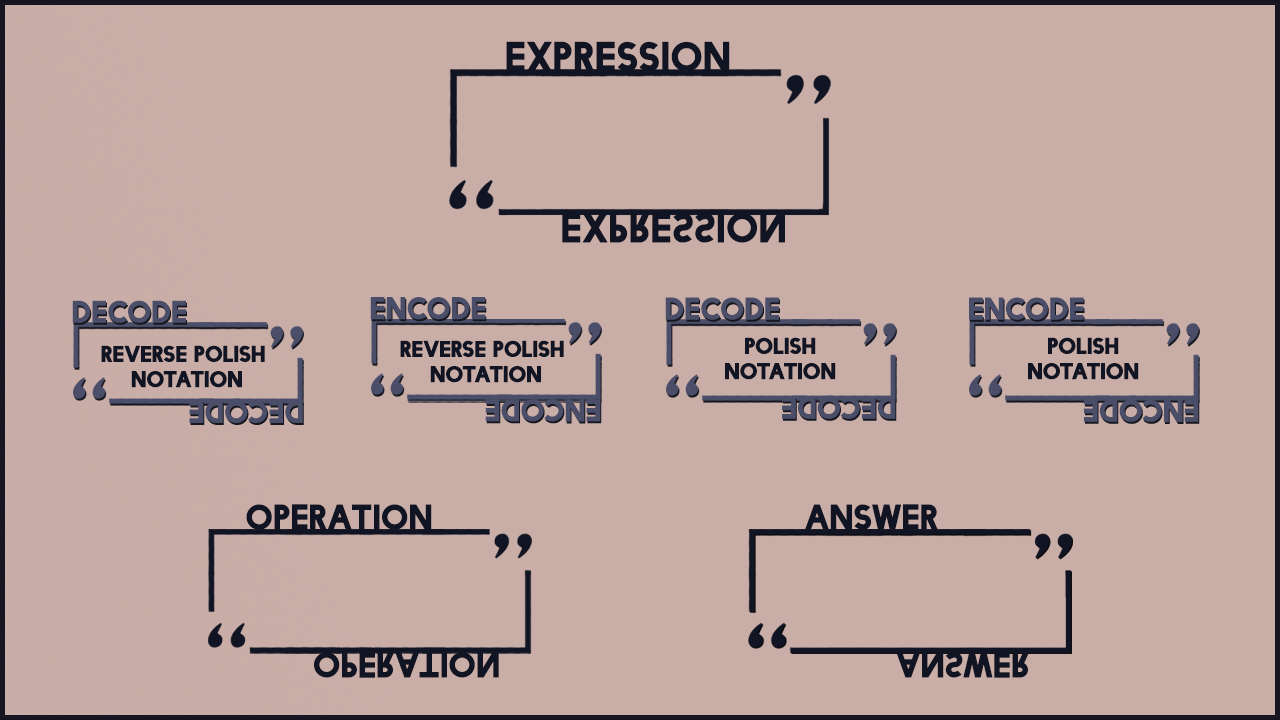
<style>
.page{position:relative;width:1280px;height:720px;background:#c9ada7}
.page>*{position:absolute;margin:0}
.t1{font:38.5px "FacileSans";color:#111422;font-weight:bold}
.t2{font:28.7px "FacileSans";color:#464a63;font-weight:bold}
.t3{font:21px "FacileSans";color:#111422;font-weight:bold}
.t4{font:32.7px "FacileSans";color:#111422;font-weight:bold}
</style>
<div class="page">
<p class="t1" style="left:506px;top:41px;width:224px;height:31px">Expression</p>
<p class="t1" style="left:562px;top:212px;width:223px;height:31px">Expression</p>
<p class="t2" style="left:72px;top:300px;width:114px;height:23px">decode</p>
<p class="t2" style="left:370px;top:297px;width:116px;height:23px">Encode</p>
<p class="t2" style="left:665px;top:297px;width:114px;height:23px">decode</p>
<p class="t2" style="left:969px;top:297px;width:115px;height:23px">Encode</p>
<p class="t3" style="left:400px;top:340px;width:164px;height:43px;text-align:center">REVERSE POLISH NOTATION</p>
<p class="t3" style="left:725px;top:337px;width:111px;height:43px;text-align:center">POLISH <br>NOTATION</p>
<p class="t3" style="left:1028px;top:337px;width:111px;height:43px;text-align:center">POLISH <br>NOTATION</p>
<p class="t3" style="left:101px;top:345px;width:164px;height:43px;text-align:center">REVERSE POLISH NOTATION</p>
<p class="t2" style="left:189px;top:400px;width:114px;height:23px;rotate:180deg">decode</p>
<p class="t2" style="left:485px;top:399px;width:116px;height:23px;rotate:180deg">encode</p>
<p class="t2" style="left:782px;top:396px;width:114px;height:23px;rotate:180deg">decode</p>
<p class="t2" style="left:1084px;top:399px;width:115px;height:23px;rotate:180deg">encode</p>
<p class="t4" style="left:246px;top:504px;width:186px;height:26px">Operation</p>
<p class="t4" style="left:805px;top:504px;width:133px;height:26px">Answer</p>
<p class="t4" style="left:314px;top:652px;width:185px;height:26px">Operation</p>
<p class="t4" style="left:896px;top:652px;width:133px;height:26px">Answer</p>
</div>
